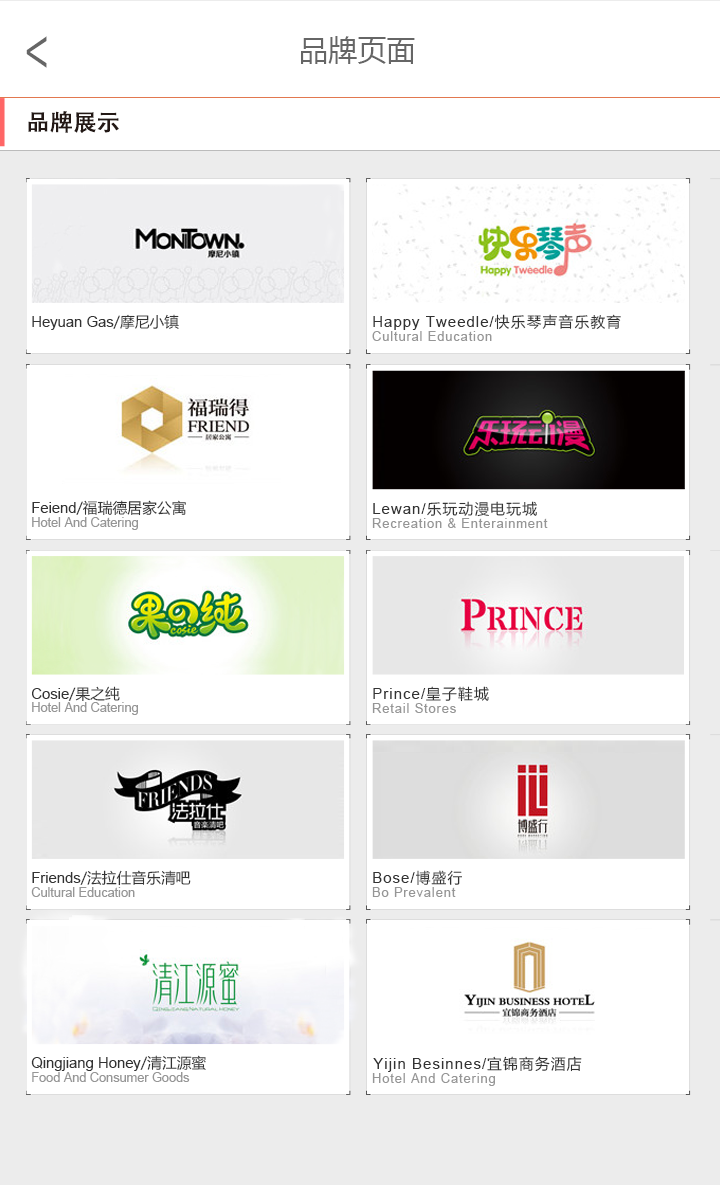
<style>
.page{position:relative;width:720px;height:1185px;background:#ffffff}
.page>*{position:absolute;margin:0}
.t1{font:51.9px "AdobeHeitiStd-Regular";color:#666666;scale:0.72 1}
.t2{font:29.2px "MicrosoftYaHei";color:#666666}
.t3{font:22.9px "AdobeHeitiStd-Regular";color:#231815;font-weight:bold}
.t4{font:14.8px "ArialMT";color:#333333}
.t5{font:14.8px "MicrosoftYaHei";color:#333333}
.t6{font:14.8px "ArialMT";letter-spacing:0.075em;color:#333333}
.t7{font:14.8px "MicrosoftYaHei";letter-spacing:0.075em;color:#333333}
.t8{font:12.7px "ArialMT";letter-spacing:0.075em;color:#969696}
.t9{font:12.7px "ArialMT";color:#969696}
</style>
<div class="page">
<p class="t1" style="left:26px;top:36px;width:21px;height:32px;rotate:180deg">&gt;</p>
<p class="t2" style="left:301px;top:36px;width:114px;height:28px">品牌页面</p>
<p class="t3" style="left:28px;top:111px;width:91px;height:22px">品牌展示</p>
<p class="t4" style="left:32px;top:314px;width:147px;height:16px">Heyuan Gas<span class="t5">/摩尼小镇</span></p>
<p class="t6" style="left:373px;top:314px;width:248px;height:16px">Happy Tweedle/<span class="t7">快乐琴声音乐教育</span></p>
<p class="t8" style="left:372px;top:331px;width:120px;height:10px">Cultural Education</p>
<p class="t5" style="left:32px;top:500px;width:154px;height:16px"><span class="t4">Feiend</span>/福瑞德居家公寓</p>
<p class="t7" style="left:373px;top:501px;width:164px;height:16px"><span class="t6">Lewan/</span>乐玩动漫电玩城</p>
<p class="t9" style="left:32px;top:517px;width:106px;height:13px">Hotel And Catering</p>
<p class="t8" style="left:372px;top:518px;width:176px;height:10px">Recreation &amp; Enterainment</p>
<p class="t4" style="left:32px;top:686px;width:88px;height:15px">Cosie<span class="t5">/果之纯</span></p>
<p class="t6" style="left:373px;top:686px;width:116px;height:16px">Prince/<span class="t7">皇子鞋城</span></p>
<p class="t9" style="left:32px;top:702px;width:106px;height:13px">Hotel And Catering</p>
<p class="t8" style="left:372px;top:703px;width:84px;height:10px">Retail Stores</p>
<p class="t5" style="left:32px;top:870px;width:159px;height:16px"><span class="t4">Friends</span>/法拉仕音乐清吧</p>
<p class="t6" style="left:373px;top:870px;width:89px;height:15px">Bose/<span class="t7">博盛行</span></p>
<p class="t9" style="left:31px;top:887px;width:104px;height:10px">Cultural Education</p>
<p class="t8" style="left:372px;top:887px;width:84px;height:10px">Bo Prevalent</p>
<p class="t4" style="left:31px;top:1055px;width:175px;height:16px">Qingjiang Honey<span class="t5">/清江源蜜</span></p>
<p class="t6" style="left:373px;top:1056px;width:209px;height:16px">Yijin Besinnes/<span class="t7">宜锦商务酒店</span></p>
<p class="t9" style="left:32px;top:1072px;width:158px;height:10px">Food And Consumer Goods</p>
<p class="t8" style="left:372px;top:1073px;width:123px;height:13px">Hotel And Catering</p>
</div>
